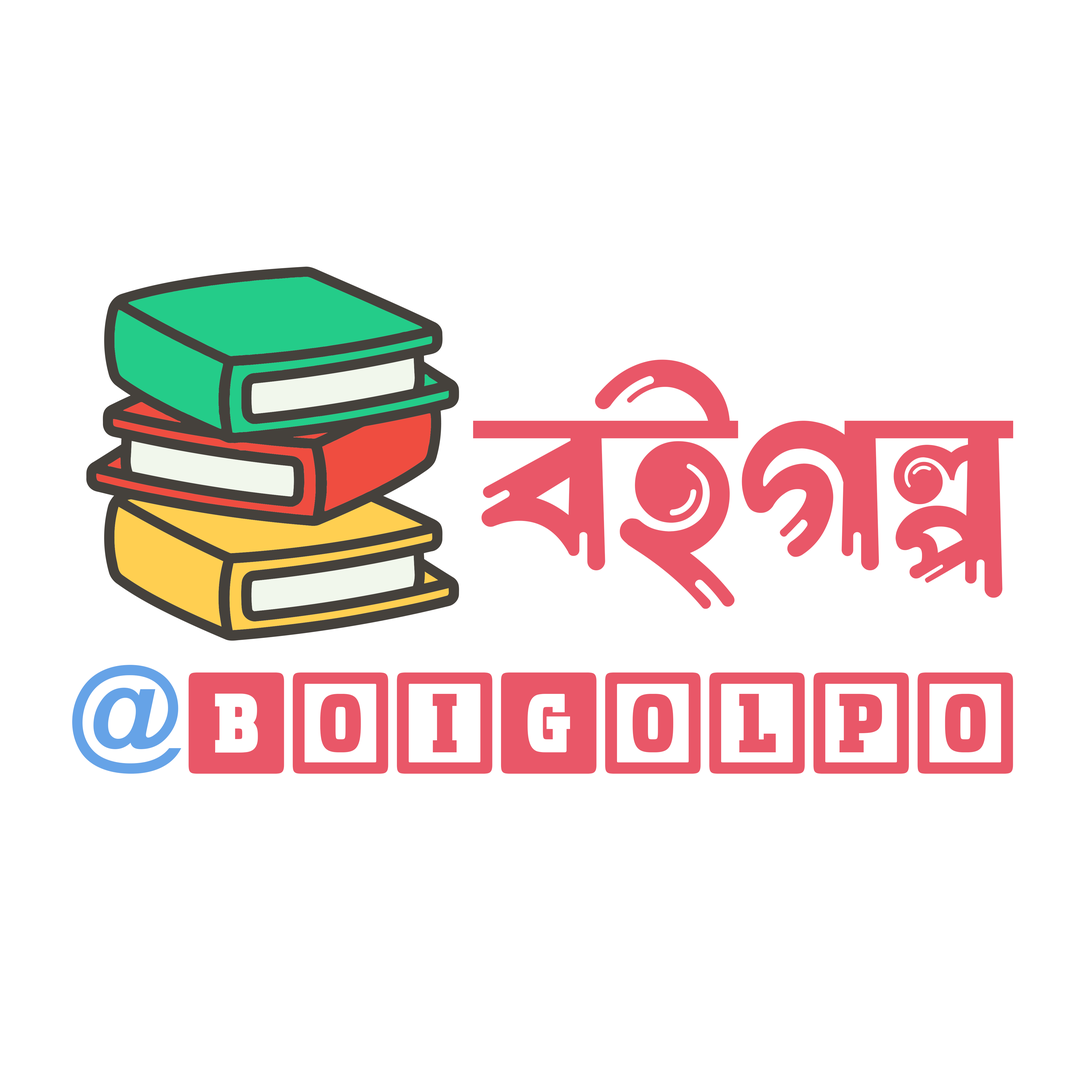
<style>
.page{position:relative;width:1092px;height:1092px;background:#ffffff}
.page>*{position:absolute;margin:0}
.t1{font:240.5px "LiSabbirAshalota1Unicode";color:#e95768}
.t2{font:115.6px "Arial-BoldMT";color:#66a3e7}
.t3{font:115.9px "UchronyCube-Bold";color:#e95768}
</style>
<div class="page">
<p class="t1" style="left:473px;top:360px;width:540px;height:249px">বইগল্প</p>
<p class="t2" style="left:72px;top:665px;width:109px;height:109px">@</p>
<p class="t3" style="left:188px;top:672px;width:825px;height:102px">BoiGolpo</p>
</div>
